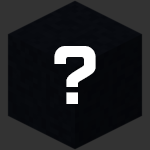
<style>
.page{position:relative;width:150px;height:150px;background:#333333}
.page>*{position:absolute;margin:0}
.t1{font:80px "IndustryInc-Base";color:#ffffff}
</style>
<div class="page">
<p class="t1" style="left:54px;top:46px;width:42px;height:58px">?</p>
</div>
